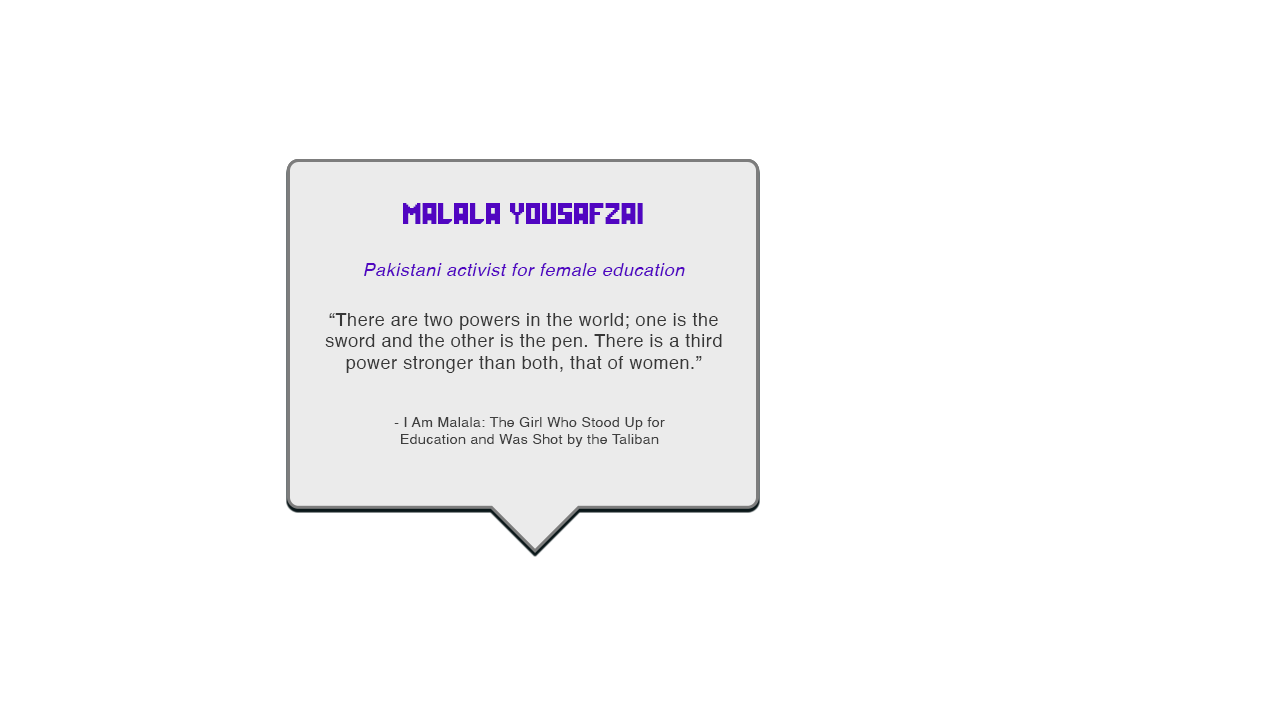
<style>
.page{position:relative;width:1280px;height:720px;background:#ffffff}
.page>*{position:absolute;margin:0}
.t1{font:24px "GalacticaGridRegular";letter-spacing:0.03em;color:#5105c1}
.t2{font:18px "Helvetica-Oblique";letter-spacing:0.03em;color:#5105c1}
.t3{font:18px "Helvetica";letter-spacing:0.03em;color:#373737}
.t4{font:14px "Helvetica";letter-spacing:0.03em;color:#3f3f3f}
</style>
<div class="page">
<p class="t1" style="left:403px;top:203px;width:240px;height:21px">Malala yousafzai</p>
<p class="t2" style="left:364px;top:263px;width:321px;height:13px">Pakistani activist for female education</p>
<p class="t3" style="left:325px;top:313px;width:397px;height:60px;text-align:center">“There are two powers in the world; one is the<br>sword and the other is the pen. There is a third<br>power stronger than both, that of women.”</p>
<p class="t4" style="left:394px;top:417px;width:271px;height:30px;text-align:center">- I Am Malala: The Girl Who Stood Up for<br>Education and Was Shot by the Taliban</p>
</div>
